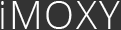
<style>
.page{position:relative;width:121px;height:30px;background:#333333}
.page>*{position:absolute;margin:0}
.t1{font:39px "OpenSans-Light";letter-spacing:0.05em;color:#ffffff;text-transform:uppercase}
.t2{font:39px "OpenSans-Light";letter-spacing:0.05em;color:#ffffff}
</style>
<div class="page">
<p class="t1" style="left:1px;top:1px;width:119px;height:28px"><span class="t2">i</span>Moxy</p>
</div>
